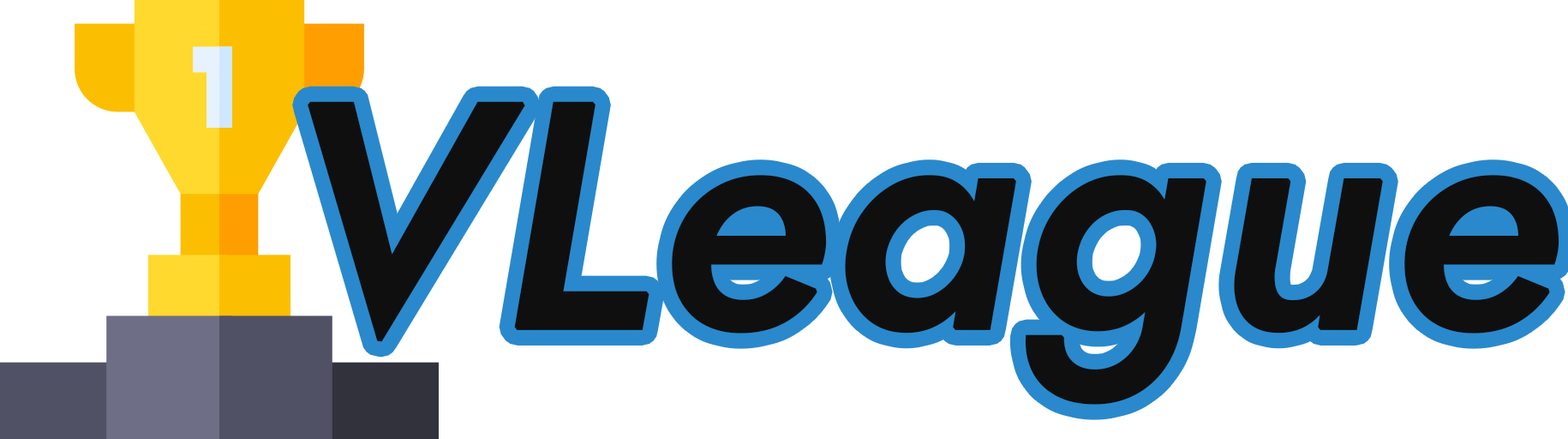
<style>
.page{position:relative;width:1568px;height:439px;background:#ffffff}
.page>*{position:absolute;margin:0}
.t1{font:318.8px "Jost-MediumItalic";color:#0f0f0f;font-weight:bold}
</style>
<div class="page">
<p class="t1" style="left:308px;top:101px;width:1251px;height:303px">VLeague</p>
</div>
